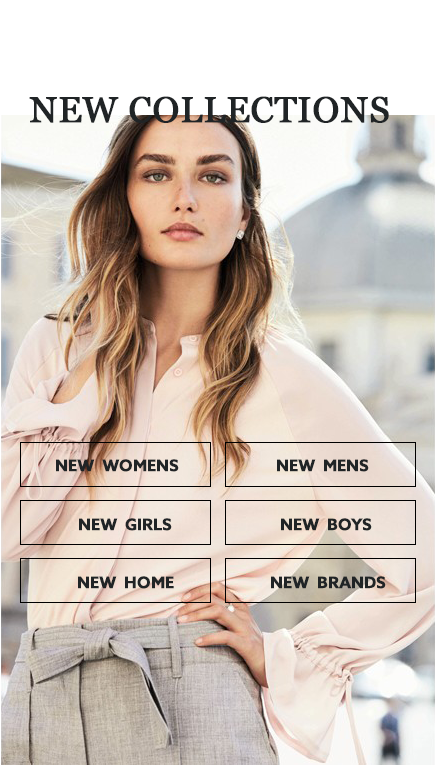
<style>
.page{position:relative;width:437px;height:765px}
.page>*{position:absolute;margin:0}
.t1{font:36px "Georgia";color:#202426;font-weight:bold}
.t2{font:16px "AzoSans-Bold";color:#202426;font-weight:bold}
</style>
<div class="page">
<p class="t1" style="left:29px;top:96px;width:360px;height:27px">NEW COLLECTIONS</p>
<p class="t2" style="left:56px;top:459px;width:123px;height:13px">NEW  WOMENS</p>
<p class="t2" style="left:277px;top:459px;width:92px;height:13px">NEW  MENS</p>
<p class="t2" style="left:79px;top:518px;width:93px;height:13px">NEW  GIRLS</p>
<p class="t2" style="left:281px;top:518px;width:91px;height:13px">NEW  BOYS</p>
<p class="t2" style="left:78px;top:576px;width:96px;height:13px">NEW  HOME</p>
<p class="t2" style="left:271px;top:576px;width:115px;height:13px">NEW  BRANDS</p>
</div>
